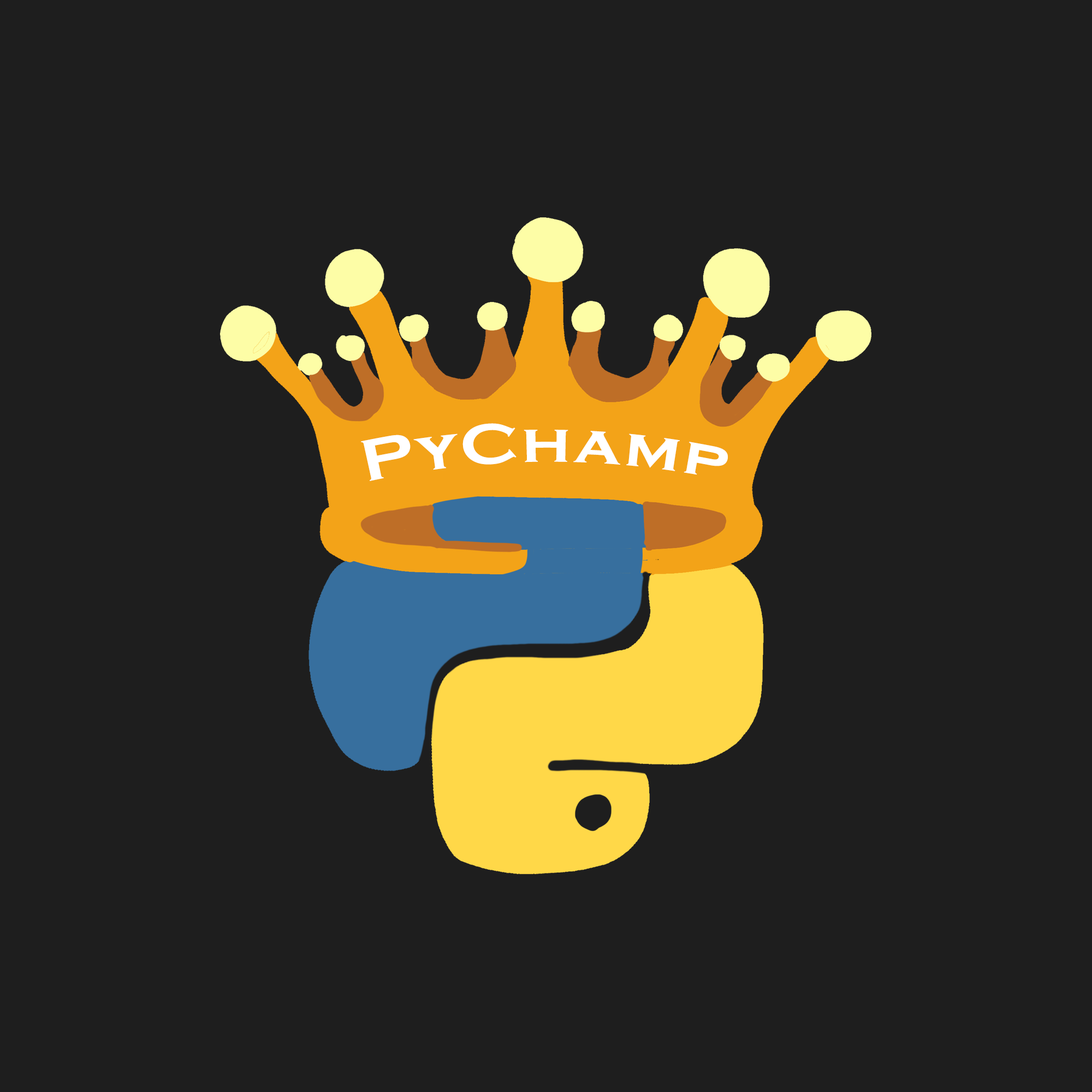
<style>
.page{position:relative;width:1092px;height:1092px;background:#1e1e1e}
.page>*{position:absolute;margin:0}
.t1{font:58.7px "CopperplateGothic-Bold";letter-spacing:0.04em;color:#ffffff;scale:1.12 1}
</style>
<div class="page">
<p class="t1" style="left:361px;top:423px;width:367px;height:58px">PyChamp</p>
</div>
